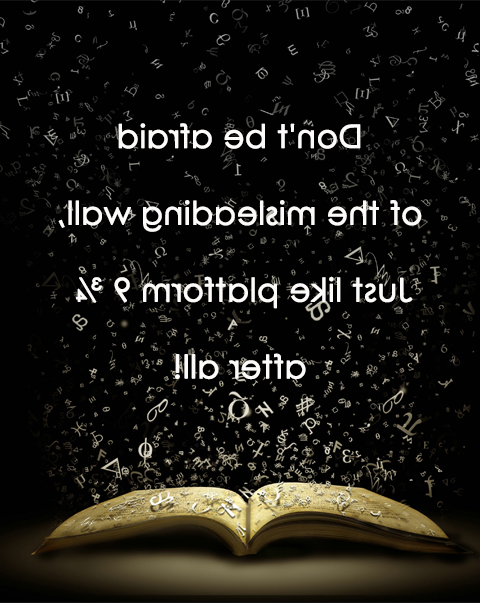
<style>
.page{position:relative;width:480px;height:603px;background:#010101}
.page>*{position:absolute;margin:0}
.t1{font:32px "CenturyGothic";color:#fdfbfa;font-weight:bold}
</style>
<div class="page">
<p class="t1" style="left:58px;top:123px;width:364px;height:257px;text-align:center;rotate:180deg">Don't be afraid<br> <br>of the misleading wall,<br><br>Just like platform 9 ¾ <br><br>after all!</p>
</div>
